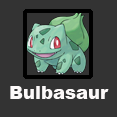
<style>
.page{position:relative;width:117px;height:117px;background:#333333}
.page>*{position:absolute;margin:0}
.t1{font:18px "Arial-Black";color:#fcf9f9}
</style>
<div class="page">
<p class="t1" style="left:10px;top:86px;width:99px;height:13px">Bulbasaur</p>
</div>
